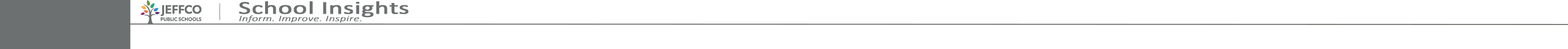
<style>
.page{position:relative;width:1568px;height:49px;background:#ffffff}
.page>*{position:absolute;margin:0}
.t1{font:18.4px "Calibri";color:#6c7070;font-weight:bold;scale:1.45 1}
.t2{font:8.2px "Calibri-LightItalic";color:#6c7070;font-weight:bold;scale:1.45 1}
</style>
<div class="page">
<p class="t1" style="left:239px;top:1px;width:170px;height:17px">School Insights</p>
<p class="t2" style="left:239px;top:15px;width:123px;height:8px">Inform. Improve. Inspire.</p>
</div>
